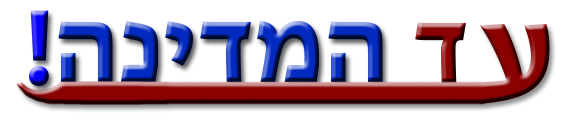
<style>
.page{position:relative;width:567px;height:128px;background:#ffffff}
.page>*{position:absolute;margin:0}
.t1{font:110px "MyriadHebrew-Bold"}
</style>
<div class="page">
<p class="t1" style="left:29px;top:10px;width:20px;height:76px">!</p>
<p class="t1" style="left:58px;top:20px;width:325px;height:63px">המדינה</p>
<p class="t1" style="left:415px;top:22px;width:51px;height:61px">ד</p>
</div>
